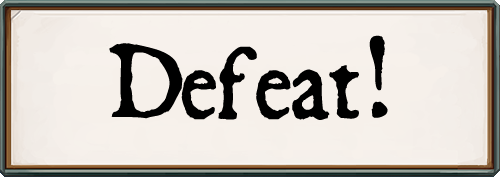
<style>
.page{position:relative;width:500px;height:177px}
.page>*{position:absolute;margin:0}
.t1{font:92px "Dominican";color:#000000}
</style>
<div class="page">
<p class="t1" style="left:109px;top:35px;width:279px;height:85px">Defeat!</p>
</div>
